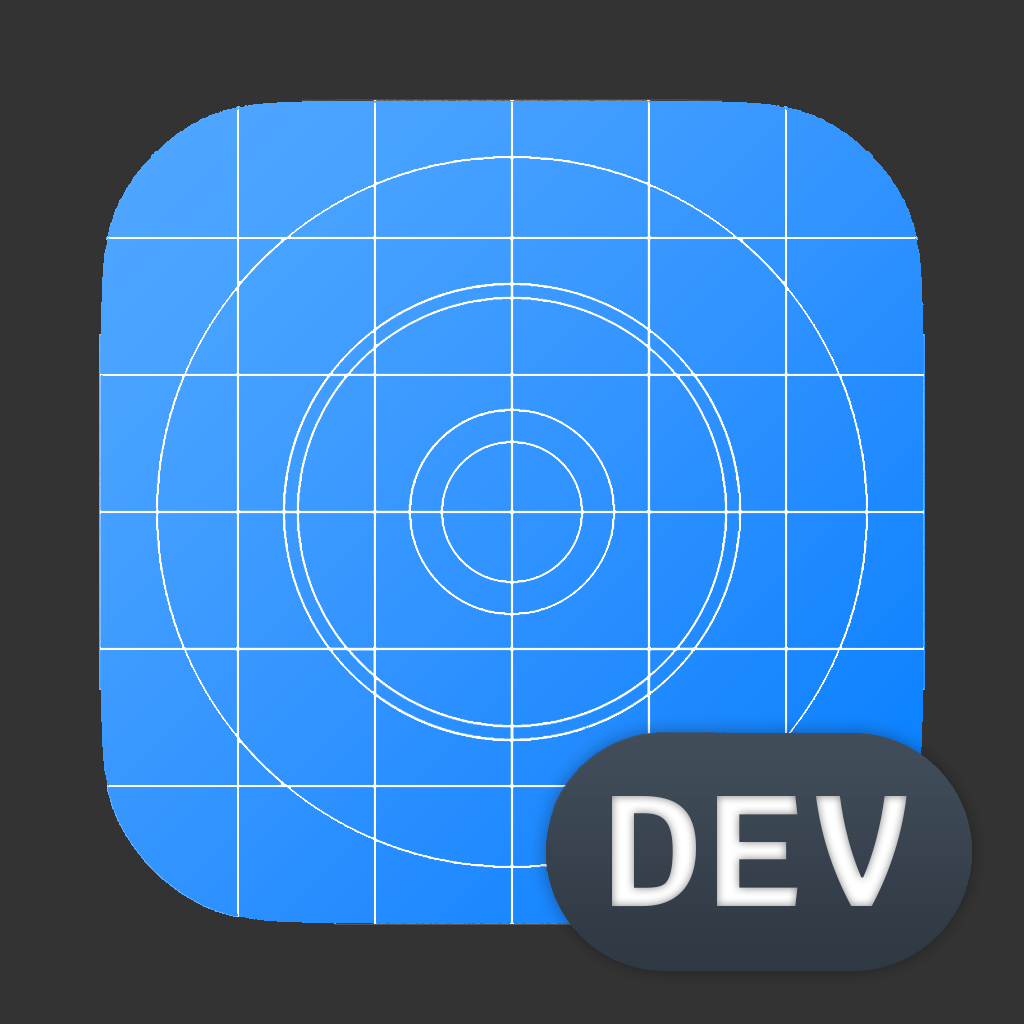
<style>
.page{position:relative;width:1024px;height:1024px;background:#333333}
.page>*{position:absolute;margin:0}
.t1{font:150px "MonaspaceArgon-SemiWideBold";color:#ffffff}
</style>
<div class="page">
<p class="t1" style="left:612px;top:796px;width:295px;height:111px">DEV</p>
</div>
